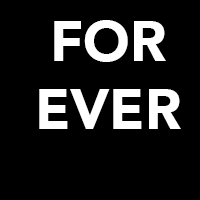
<style>
.page{position:relative;width:200px;height:200px;background:#000000}
.page>*{position:absolute;margin:0}
.t1{font:56px "Avenir-Black";color:#ffffff;text-transform:uppercase}
</style>
<div class="page">
<p class="t1" style="left:39px;top:20px;width:142px;height:109px;text-align:center">For<br>Ever</p>
</div>
